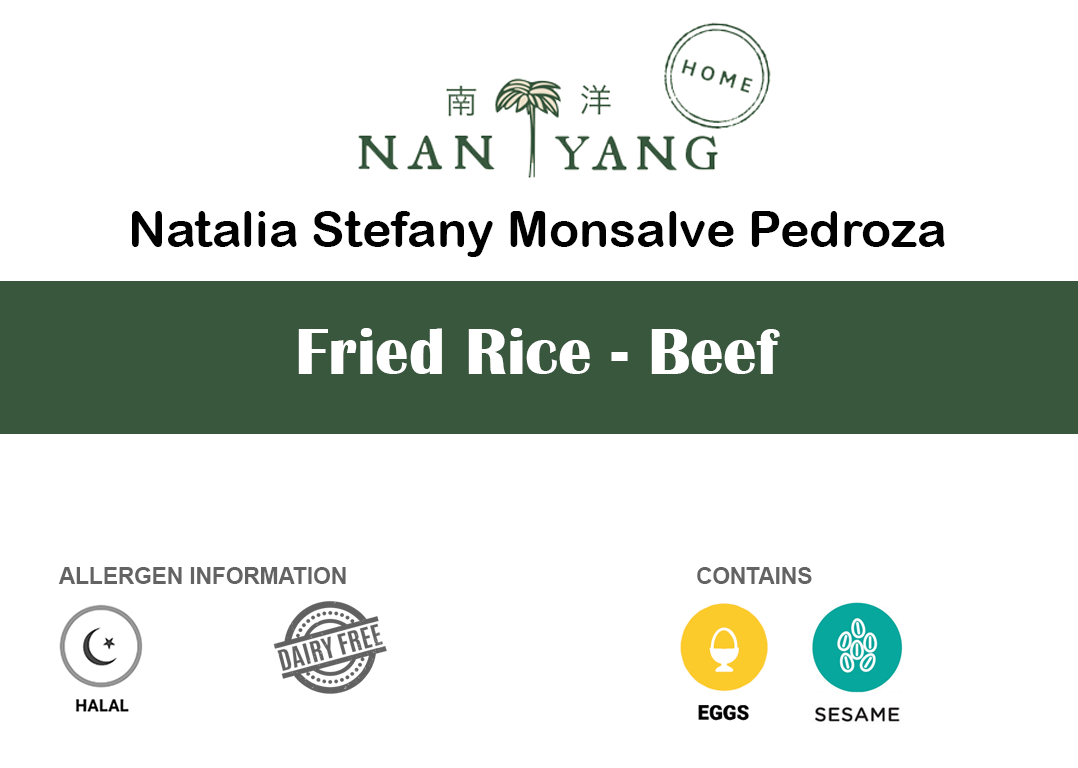
<style>
.page{position:relative;width:1078px;height:768px;background:#ffffff}
.page>*{position:absolute;margin:0}
.t1{font:50px "ArialRoundedMTBold";color:#000000}
.t2{font:66.7px "BritannicBold";color:#ffffff}
.t3{font:22.6px "Arial-BoldMT";color:#636363}
</style>
<div class="page">
<p class="t1" style="left:132px;top:211px;width:813px;height:46px">Natalia Stefany Monsalve Pedroza</p>
<p class="t2" style="left:298px;top:328px;width:482px;height:46px">Fried Rice - Beef</p>
<p class="t3" style="left:58px;top:567px;width:288px;height:17px">ALLERGEN INFORMATION</p>
<p class="t3" style="left:697px;top:567px;width:115px;height:17px">CONTAINS</p>
</div>
